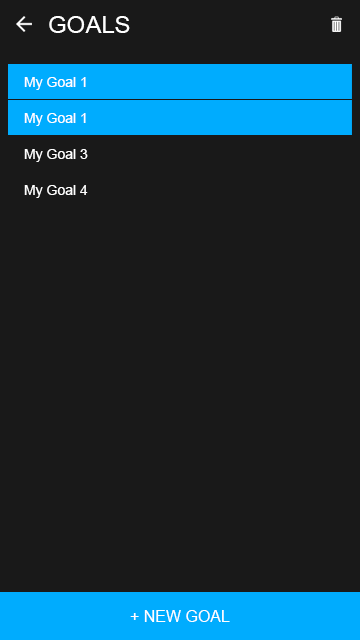
<style>
.page{position:relative;width:360px;height:640px;background:#191919}
.page>*{position:absolute;margin:0}
.t1{font:24px "ArialMT";color:#ffffff}
.t2{font:14px "ArialMT";color:#ffffff}
.t3{font:16px "ArialMT";color:#ffffff}
</style>
<div class="page">
<p class="t1" style="left:49px;top:16px;width:81px;height:17px">GOALS</p>
<p class="t2" style="left:24px;top:77px;width:62px;height:13px">My Goal 1</p>
<p class="t2" style="left:24px;top:113px;width:62px;height:13px">My Goal 1</p>
<p class="t2" style="left:24px;top:149px;width:64px;height:13px">My Goal 3</p>
<p class="t2" style="left:24px;top:185px;width:64px;height:13px">My Goal 4</p>
<p class="t3" style="left:130px;top:610px;width:100px;height:12px">+ NEW GOAL</p>
</div>
